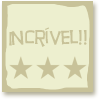
<style>
.page{position:relative;width:99px;height:99px;background:#edefcf}
.page>*{position:absolute;margin:0}
.t1{font:18.8px "HurryUp-Regular";color:#c8c299}
</style>
<div class="page">
<p class="t1" style="left:9px;top:27px;width:78px;height:20px">Incrível!!</p>
</div>
